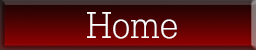
<style>
.page{position:relative;width:256px;height:50px}
.page>*{position:absolute;margin:0}
.t1{font:56.3px "DilleniaUPC";color:#ffffff}
</style>
<div class="page">
<p class="t1" style="left:87px;top:12px;width:90px;height:27px">Home</p>
</div>
